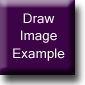
<style>
.page{position:relative;width:85px;height:85px;background:#3d0347}
.page>*{position:absolute;margin:0}
.t1{font:14.6px "Gautami";color:#ffffff}
</style>
<div class="page">
<p class="t1" style="left:13px;top:13px;width:52px;height:48px;text-align:center">Draw Image Example</p>
</div>
